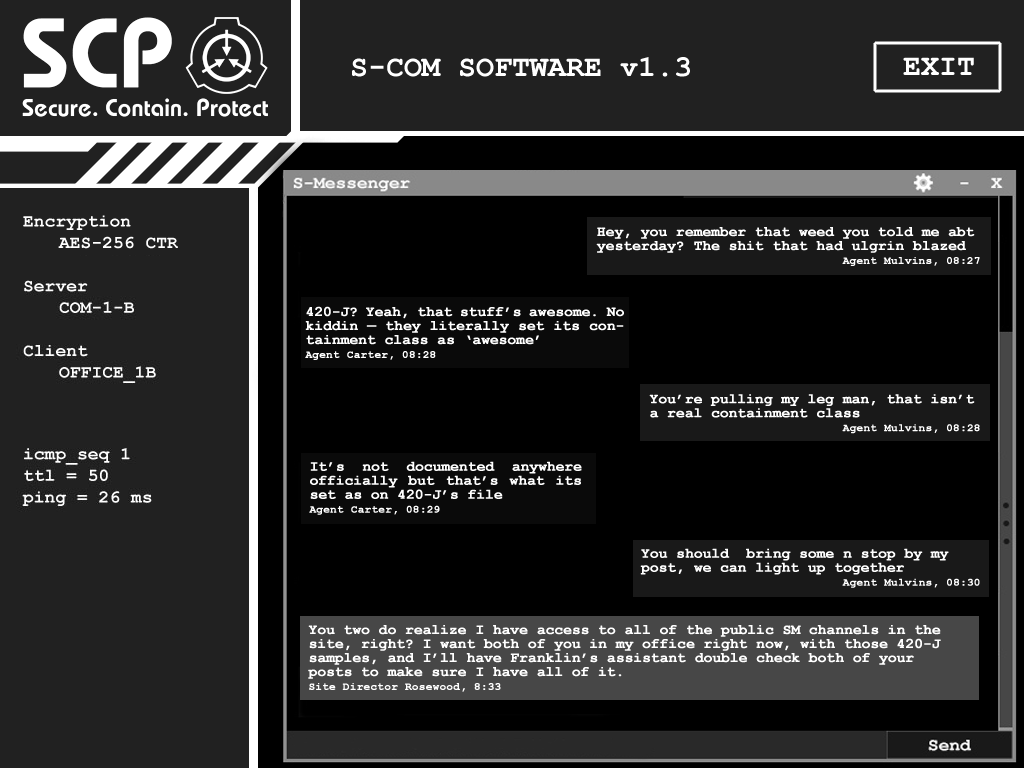
<style>
.page{position:relative;width:1024px;height:768px;background:#000000}
.page>*{position:absolute;margin:0}
.t1{font:14px/14px "CourierNewPS-BoldMT";color:#ffffff;font-weight:bold}
.t2{font:11px/14px "CourierNewPS-BoldMT";color:#ffffff;font-weight:bold}
</style>
<div class="page">
<p class="t1" style="left:596px;top:227px;width:384px;height:39px;text-align:justify">Hey, you remember that weed you told me abt <br>yesterday? The shit that had ulgrin blazed<br>                            <span class="t2">Agent Mulvins, 08:27</span></p>
<p class="t1" style="left:305px;top:306px;width:319px;height:54px;text-align:justify">420-J? Yeah, that stuff’s awesome. No kiddin — they literally set its containment class as ‘awesome’<br><span class="t2">Agent Carter, 08:28</span></p>
<p class="t1" style="left:649px;top:394px;width:331px;height:40px">You’re pulling my leg man, that isn’t<br>a real containment class<br>                       <span class="t2">Agent Mulvins, 08:28</span></p>
<p class="t1" style="left:309px;top:461px;width:273px;height:54px;text-align:justify">It’s not documented anywhere officially but that’s what its set as on 420-J’s file<br><span class="t2">Agent Carter, 08:29</span></p>
<p class="t1" style="left:640px;top:548px;width:340px;height:40px;text-align:justify">You should  bring some n stop by my<br>post, we can light up together<br>                          <span class="t2">Agent Mulvins, 08:30</span></p>
<p class="t1" style="left:308px;top:625px;width:633px;height:67px">You two do realize I have access to all of the public SM channels in the site, right? I want both of you in my office right now, with those 420-J samples, and I’ll have Franklin’s assistant double check both of your posts to make sure I have all of it.<br><span class="t2">Site Director Rosewood, 8:33</span></p>
</div>
